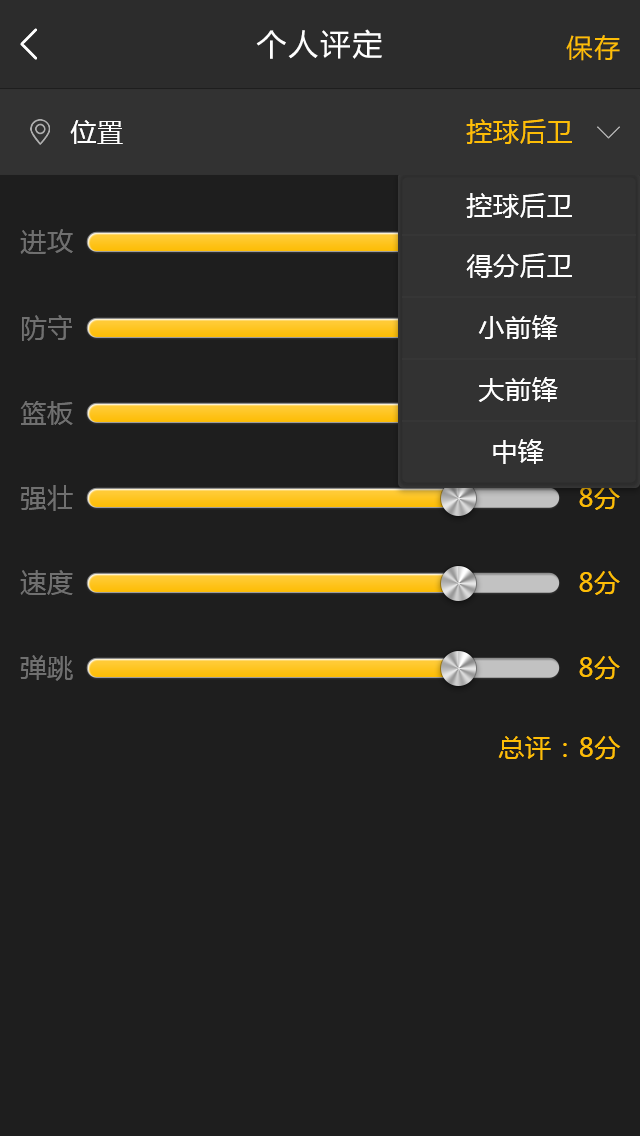
<style>
.page{position:relative;width:640px;height:1136px;background:#1e1e1e}
.page>*{position:absolute;margin:0}
.t1{font:30px "MicrosoftYaHei";letter-spacing:0.07em;color:#ffffff}
.t2{font:26px "MicrosoftYaHei";letter-spacing:0.07em;color:#fdbd06}
.t3{font:26px "MicrosoftYaHei";letter-spacing:0.03em;color:#ffffff}
.t4{font:26px "MicrosoftYaHei";letter-spacing:0.03em;color:#fdbd06}
.t5{font:26px "MicrosoftYaHei";letter-spacing:0.03em;color:#707070}
</style>
<div class="page">
<p class="t1" style="left:256px;top:29px;width:126px;height:30px">个人评定</p>
<p class="t2" style="left:566px;top:35px;width:54px;height:26px">保存</p>
<p class="t3" style="left:70px;top:120px;width:53px;height:24px">位置</p>
<p class="t4" style="left:466px;top:119px;width:106px;height:25px">控球后卫</p>
<p class="t3" style="left:466px;top:193px;width:106px;height:25px">控球后卫</p>
<p class="t5" style="left:20px;top:229px;width:53px;height:25px">进攻</p>
<p class="t3" style="left:466px;top:253px;width:106px;height:25px">得分后卫</p>
<p class="t5" style="left:22px;top:315px;width:50px;height:26px">防守</p>
<p class="t3" style="left:478px;top:315px;width:80px;height:25px">小前锋</p>
<p class="t3" style="left:478px;top:377px;width:80px;height:25px">大前锋</p>
<p class="t5" style="left:20px;top:401px;width:53px;height:24px">篮板</p>
<p class="t3" style="left:493px;top:439px;width:51px;height:25px">中锋</p>
<p class="t5" style="left:21px;top:485px;width:52px;height:26px">强壮</p>
<p class="t4" style="left:579px;top:486px;width:41px;height:24px">8分</p>
<p class="t5" style="left:20px;top:570px;width:53px;height:25px">速度</p>
<p class="t4" style="left:579px;top:571px;width:41px;height:24px">8分</p>
<p class="t5" style="left:20px;top:655px;width:53px;height:26px">弹跳</p>
<p class="t4" style="left:579px;top:656px;width:41px;height:24px">8分</p>
<p class="t4" style="left:498px;top:736px;width:123px;height:24px">总评：8分</p>
</div>
